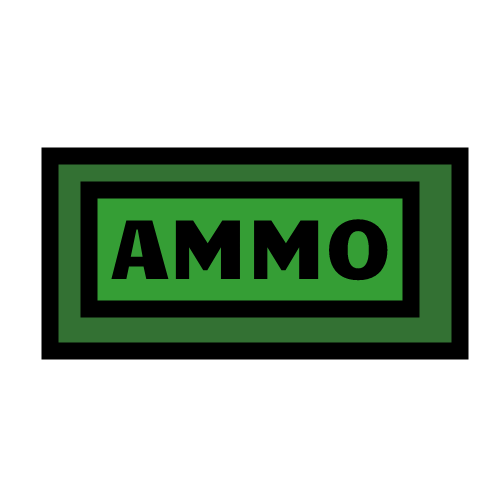
<style>
.page{position:relative;width:500px;height:500px;background:#ffffff}
.page>*{position:absolute;margin:0}
.t1{font:84.9px "Candal";color:#000000}
</style>
<div class="page">
<p class="t1" style="left:111px;top:219px;width:277px;height:62px">AMMO</p>
</div>
